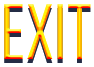
<style>
.page{position:relative;width:94px;height:67px;background:#ffffff}
.page>*{position:absolute;margin:0}
.t1{font:72px "AgencyFB-Reg"}
</style>
<div class="page">
<p class="t1" style="left:4px;top:4px;width:87px;height:55px">EXIT</p>
</div>
